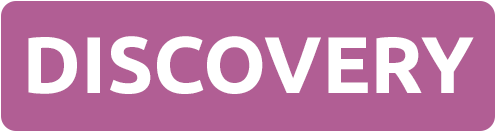
<style>
.page{position:relative;width:496px;height:132px;background:#b15e94}
.page>*{position:absolute;margin:0}
.t1{font:80px "Ubuntu-Bold";color:#ffffff}
</style>
<div class="page">
<p class="t1" style="left:28px;top:36px;width:446px;height:58px">DISCOVERY</p>
</div>
